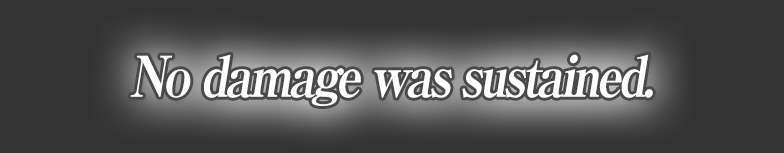
<style>
.page{position:relative;width:784px;height:153px;background:#333333}
.page>*{position:absolute;margin:0}
.t1{font:56px "RyuminPro-ExBold";letter-spacing:-0.08em;color:#ffffff;font-style:italic;scale:0.9 1}
</style>
<div class="page">
<p class="t1" style="left:130px;top:54px;width:523px;height:52px">No damage was sustained.</p>
</div>
